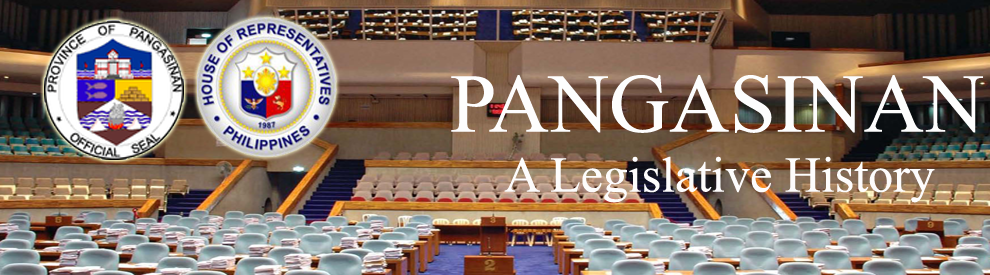
<style>
.page{position:relative;width:990px;height:275px}
.page>*{position:absolute;margin:0}
.t1{font:50px "TimesNewRomanPSMT";color:#fdfcfc}
.t2{font:83.3px "TimesNewRomanPSMT";color:#fdfdfd}
</style>
<div class="page">
<p class="t1" style="left:451px;top:75px;width:532px;height:128px;text-align:center"><span class="t2">PANGASINAN<br></span>A Legislative History</p>
</div>
